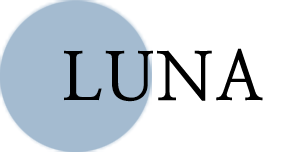
<style>
.page{position:relative;width:300px;height:152px;background:#ffffff}
.page>*{position:absolute;margin:0}
.t1{font:66.9px "NanumMyeongjoBold";letter-spacing:0.04em;color:#000000;text-transform:uppercase}
</style>
<div class="page">
<p class="t1" style="left:64px;top:48px;width:199px;height:54px">LUNA</p>
</div>
